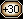
<style>
.page{position:relative;width:23px;height:19px;background:#000000}
.page>*{position:absolute;margin:0}
.t1{font:11px "ArialMT";letter-spacing:-0.025em;color:#000000}
.t2{font:11px "ArialMT";letter-spacing:-0.1em;color:#000000}
</style>
<div class="page">
<p class="t1" style="left:3px;top:5px;width:16px;height:8px"><span class="t2">+</span>30</p>
</div>
